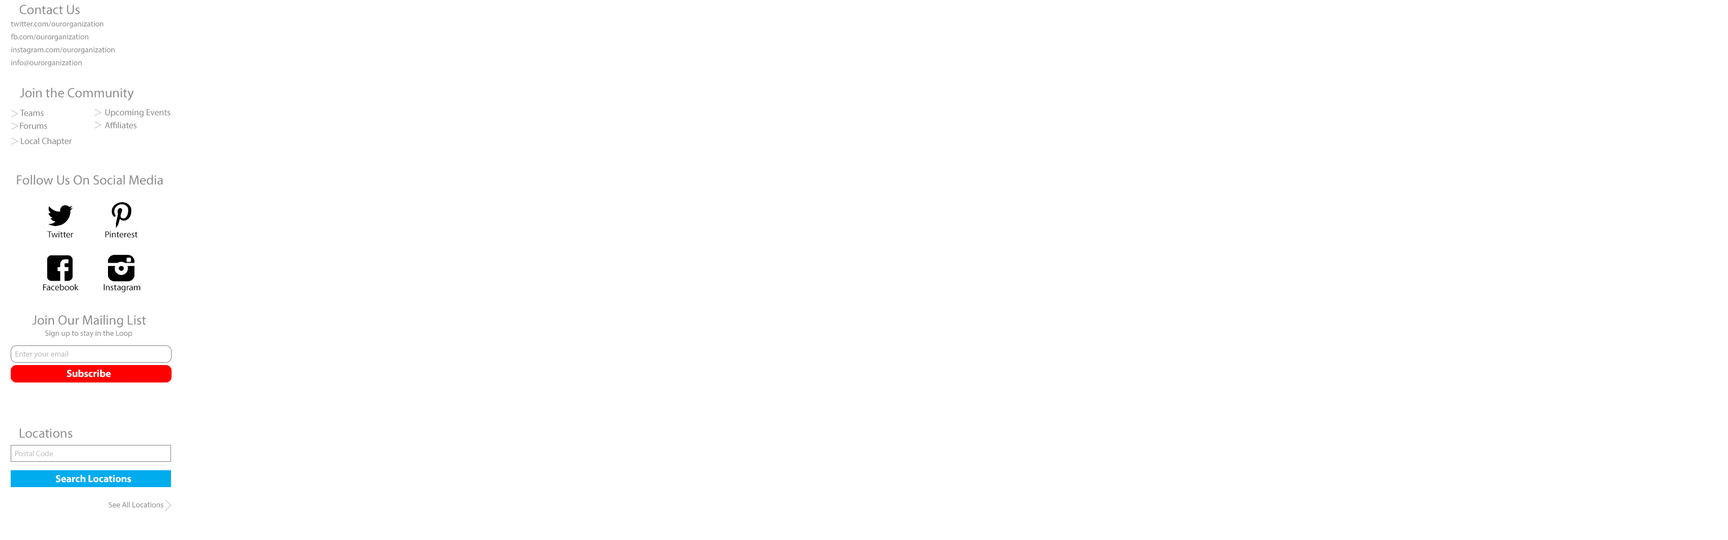
<style>
.page{position:relative;width:1728px;height:540px;background:#ffffff}
.page>*{position:absolute;margin:0}
.t1{font:13.5px "MyriadPro-Regular";color:#888888}
.t2{font:7.9px/12.9px "MyriadPro-Regular";color:#888888}
.t3{font:9px "MyriadPro-Regular";color:#888888}
.t4{font:9px "MyriadPro-Regular";color:#010101}
.t5{font:9px "MyriadPro-Regular";color:#000000}
.t6{font:7.9px "MyriadPro-Regular";color:#888888}
.t7{font:7.9px "MyriadPro-Regular";color:#b8b8b8}
.t8{font:10.1px "MyriadPro-Bold";color:#ffffff}
.t9{font:7.9px "MyriadPro-Regular";color:#bdbdbd}
</style>
<div class="page">
<p class="t1" style="left:20px;top:4px;width:60px;height:11px">Contact Us</p>
<p class="t2" style="left:11px;top:21px;width:104px;height:46px">twitter.com/ourorganization<br>fb.com/ourorganization<br>instagram.com/ourorganization<br>info@ourorganization</p>
<p class="t1" style="left:20px;top:88px;width:114px;height:13px">Join the Community</p>
<p class="t3" style="left:20px;top:110px;width:24px;height:6px">Teams</p>
<p class="t3" style="left:105px;top:109px;width:65px;height:9px">Upcoming Events</p>
<p class="t3" style="left:20px;top:123px;width:27px;height:6px">Forums</p>
<p class="t3" style="left:105px;top:122px;width:32px;height:7px">Affiliates</p>
<p class="t3" style="left:21px;top:137px;width:51px;height:9px">Local Chapter</p>
<p class="t1" style="left:17px;top:175px;width:146px;height:10px">Follow Us On Social Media</p>
<p class="t4" style="left:47px;top:231px;width:27px;height:7px">Twitter</p>
<p class="t5" style="left:105px;top:231px;width:33px;height:7px">Pinterest</p>
<p class="t5" style="left:43px;top:284px;width:36px;height:7px">Facebook</p>
<p class="t5" style="left:104px;top:284px;width:37px;height:8px">Instagram</p>
<p class="t1" style="left:32px;top:315px;width:114px;height:12px">Join Our Mailing List</p>
<p class="t6" style="left:45px;top:330px;width:87px;height:8px">Sign up to stay in the Loop</p>
<p class="t7" style="left:15px;top:351px;width:53px;height:7px">Enter your email</p>
<p class="t8" style="left:67px;top:370px;width:44px;height:7px">Subscribe</p>
<p class="t1" style="left:20px;top:428px;width:53px;height:10px">Locations</p>
<p class="t9" style="left:15px;top:451px;width:38px;height:5px">Postal Code</p>
<p class="t8" style="left:56px;top:475px;width:75px;height:8px">Search Locations</p>
<p class="t6" style="left:109px;top:502px;width:55px;height:5px">See All Locations</p>
</div>
